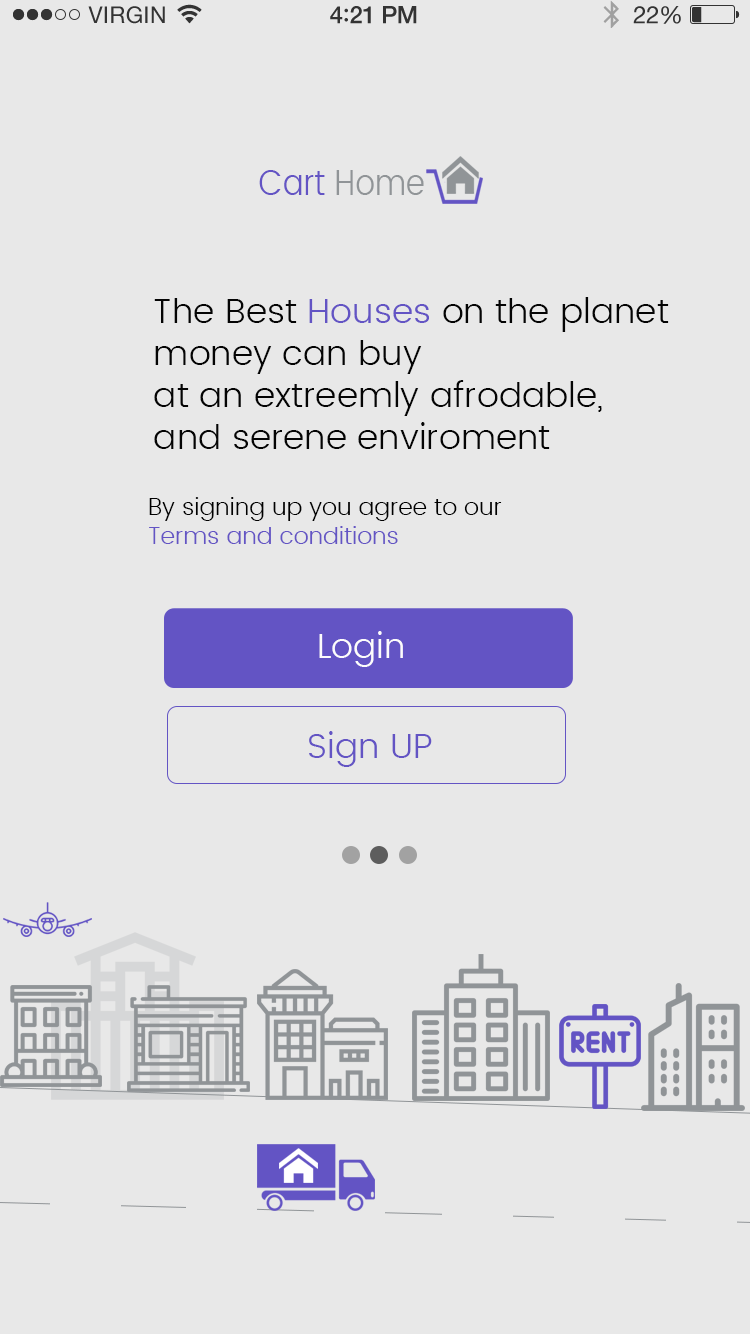
<style>
.page{position:relative;width:750px;height:1334px;background:#e8e8e8}
.page>*{position:absolute;margin:0}
.t1{font:35.8px "Poppins-Light";color:#6354c4;scale:0.87 1}
.t2{font:35.8px "Poppins-Light";color:#909497;scale:0.87 1}
.t3{font:35px "Poppins-Light";color:#040404}
.t4{font:35px "Poppins-Light";color:#6354c4}
.t5{font:23.7px "Poppins-Light";color:#000000}
.t6{font:23.7px "Poppins-Light";color:#6354c4}
.t7{font:35px "Poppins-Light";color:#fdfcfc}
</style>
<div class="page">
<p class="t1" style="left:259px;top:170px;width:165px;height:25px">Cart <span class="t2">Home</span></p>
<p class="t3" style="left:154px;top:297px;width:515px;height:152px">The Best <span class="t4">Houses</span> on the planet <br>money can buy <br>at an extreemly afrodable,<br>and serene enviroment</p>
<p class="t5" style="left:149px;top:497px;width:353px;height:47px">By signing up you agree to our<br><span class="t6">Terms and conditions</span></p>
<p class="t7" style="left:319px;top:631px;width:84px;height:36px">Login</p>
<p class="t4" style="left:309px;top:731px;width:123px;height:36px">Sign UP</p>
</div>
